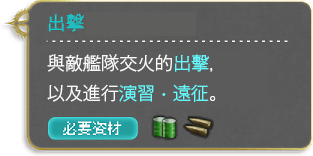
<style>
.page{position:relative;width:313px;height:156px;background:#5b5b5b}
.page>*{position:absolute;margin:0}
.t1{font:18px/30px "GothicMB101Pr6N-Light";color:#fbfaf9}
.t2{font:18px/30px "GothicMB101Pr6N-Light";color:#64fbff}
.t3{font:18px/30px "DFKaiShu-SB-Estd-BF";color:#64fbff}
</style>
<div class="page">
<p class="t1" style="left:47px;top:54px;width:169px;height:48px">與敵艦隊交火的<span class="t2">出擊</span>，<br>以及進行<span class="t2">演習</span><span class="t3">．</span><span class="t2">遠征</span>。</p>
</div>
